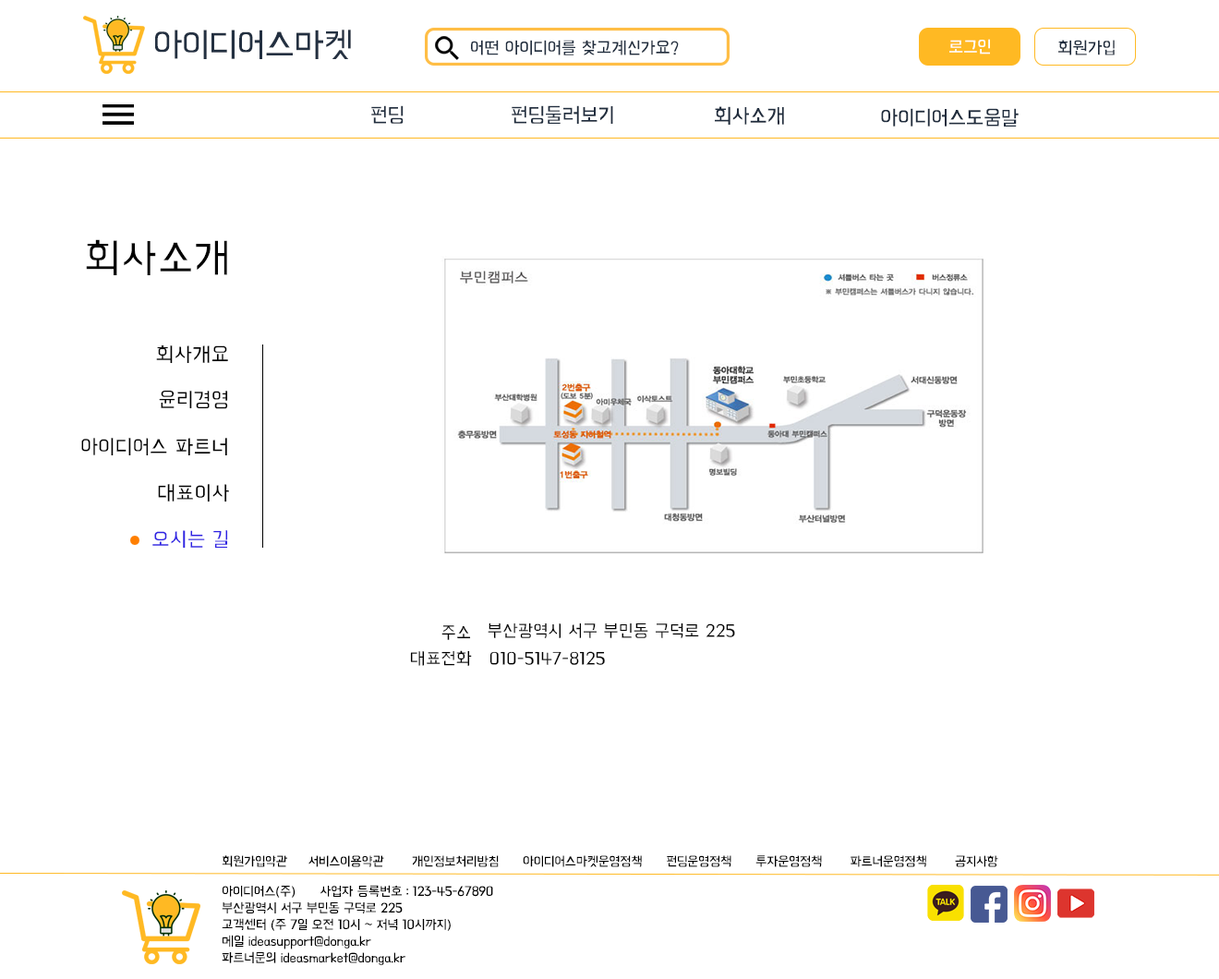
<style>
.page{position:relative;width:1219px;height:979px;background:#ffffff}
.page>*{position:absolute;margin:0}
.t1{font:36.9px "BMHANNAAir";letter-spacing:-0.03em;color:#233041}
.t2{font:18.5px "BMHANNAAir";letter-spacing:-0.02em;color:#202d3e}
.t3{font:18.5px "BMHANNAAir";letter-spacing:-0.02em;color:#ffffff}
.t4{font:22.2px "BMHANNAAir";letter-spacing:-0.02em;color:#202d3e}
.t5{font:44.3px "BMHANNAAir";color:#000000}
.t6{font:22.2px "BMHANNAAir";color:#000000}
.t7{font:22.2px "BMHANNAAir";color:#2f22e3}
.t8{font:18.5px "BMHANNAAir";color:#000000}
.t9{font:13.8px "BMHANNAAir";letter-spacing:-0.025em;color:#000000}
.t10{font:13.8px "BMHANNAAir";letter-spacing:-0.02em;color:#000000}
</style>
<div class="page">
<p class="t1" style="left:155px;top:30px;width:196px;height:29px">아이디어스마켓</p>
<p class="t2" style="left:471px;top:40px;width:208px;height:15px">어떤 아이디어를 찾고계신가요?</p>
<p class="t3" style="left:949px;top:39px;width:41px;height:15px">로그인</p>
<p class="t2" style="left:1058px;top:40px;width:56px;height:15px">회원가입</p>
<p class="t4" style="left:371px;top:105px;width:32px;height:19px">펀딩</p>
<p class="t4" style="left:511px;top:105px;width:102px;height:19px">펀딩둘러보기</p>
<p class="t4" style="left:715px;top:106px;width:69px;height:19px">회사소개</p>
<p class="t4" style="left:881px;top:108px;width:137px;height:18px">아이디어스도움말</p>
<p class="t5" style="left:86px;top:239px;width:141px;height:36px">회사소개</p>
<p class="t6" style="left:156px;top:344px;width:72px;height:20px">회사개요</p>
<p class="t6" style="left:159px;top:390px;width:69px;height:19px">윤리경영</p>
<p class="t6" style="left:81px;top:438px;width:146px;height:18px">아이디어스 파트너</p>
<p class="t6" style="left:158px;top:484px;width:71px;height:18px">대표이사</p>
<p class="t7" style="left:152px;top:530px;width:76px;height:18px">오시는 길</p>
<p class="t8" style="left:441px;top:625px;width:30px;height:15px">주소</p>
<p class="t8" style="left:487px;top:622px;width:248px;height:16px">부산광역시 서구 부민동 구덕로 225</p>
<p class="t8" style="left:410px;top:650px;width:62px;height:16px">대표전화</p>
<p class="t8" style="left:489px;top:651px;width:116px;height:14px">010-5147-8125</p>
<p class="t9" style="left:222px;top:855px;width:776px;height:12px">회원가입약관       서비스이용약관       개인정보처리방침      아이디어스마켓운영정책      펀딩운영정책      투자운영정책       파트너운영정책       공지사항</p>
<p class="t10" style="left:222px;top:884px;width:271px;height:81px">아이디어스(주)      사업자 등록번호 : 123-45-67890  <br>부산광역시 서구 부민동 구덕로 225<br>고객센터 (주 7일 오전 10시 ~ 저녁 10시까지)<br>메일 ideasupport@donga.kr<br>파트너문의 ideasmarket@donga.kr</p>
</div>
